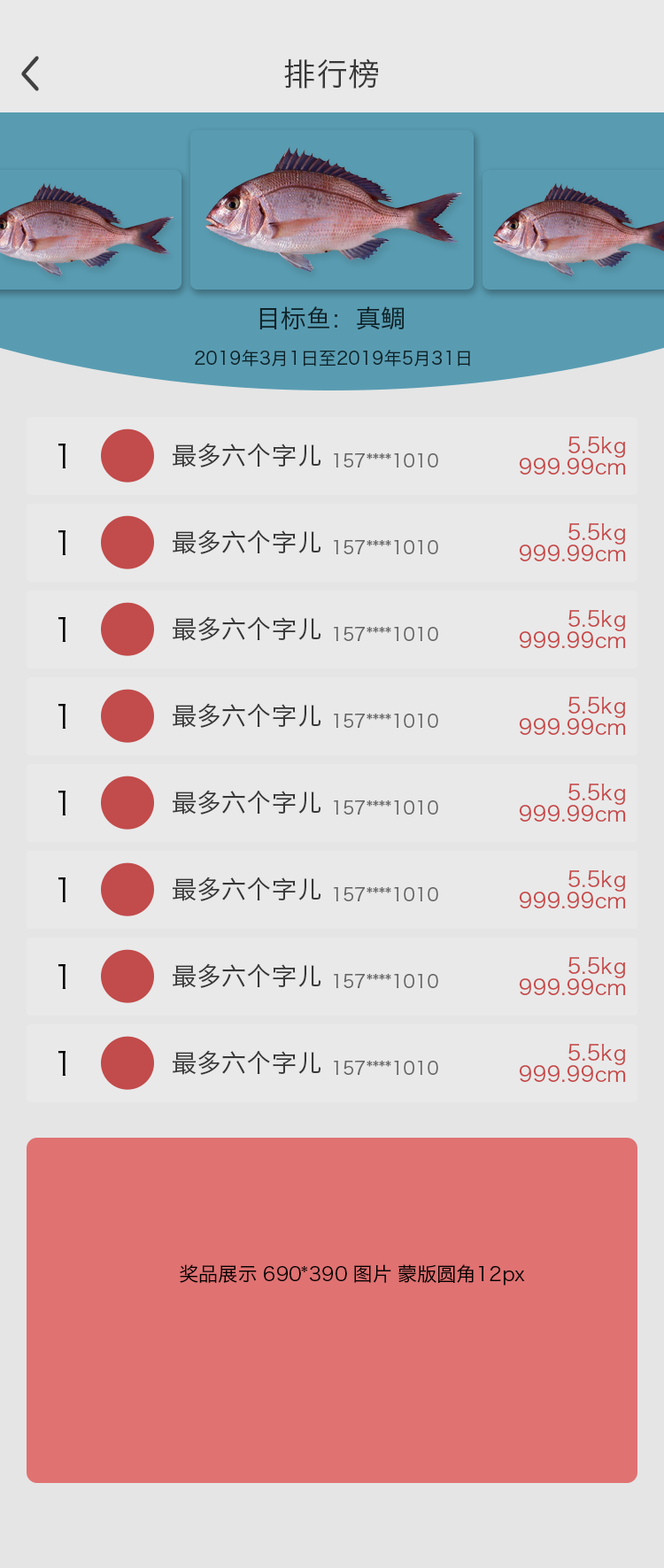
<style>
.page{position:relative;width:664px;height:1568px;background:#e9e9e9}
.page>*{position:absolute;margin:0}
.t1{font:31.9px "HiraginoSansGB-W3";color:#373737}
.t2{font:24.8px "HiraginoSansGB-W3";color:#0f2228}
.t3{font:17.7px "HiraginoSansGB-W3";color:#0f2228}
.t4{font:21.2px/21.2px "HiraginoSansGB-W3";color:#c64646}
.t5{font:31.9px "HiraginoSansGB-W3";color:#000000}
.t6{font:24.8px "HiraginoSansGB-W3";color:#373737}
.t7{font:17.7px "HiraginoSansGB-W3";color:#646464}
.t8{font:19.5px "HiraginoSansGB-W3";color:#000000}
</style>
<div class="page">
<p class="t1" style="left:284px;top:58px;width:94px;height:31px">排行榜</p>
<p class="t1" style="left:284px;top:58px;width:94px;height:31px">排行榜</p>
<p class="t2" style="left:259px;top:306px;width:146px;height:24px">目标鱼：真鲷</p>
<p class="t2" style="left:259px;top:306px;width:146px;height:24px">目标鱼：真鲷</p>
<p class="t3" style="left:195px;top:350px;width:275px;height:17px">2019年3月1日至2019年5月31日</p>
<p class="t3" style="left:195px;top:350px;width:275px;height:17px">2019年3月1日至2019年5月31日</p>
<p class="t4" style="left:519px;top:436px;width:107px;height:39px;text-align:right">5.5kg<br>999.99cm</p>
<p class="t4" style="left:519px;top:436px;width:107px;height:39px;text-align:right">5.5kg<br>999.99cm</p>
<p class="t5" style="left:58px;top:444px;width:8px;height:24px">1</p>
<p class="t5" style="left:58px;top:444px;width:8px;height:24px">1</p>
<p class="t6" style="left:173px;top:443px;width:148px;height:24px">最多六个字儿</p>
<p class="t6" style="left:173px;top:443px;width:148px;height:24px">最多六个字儿</p>
<p class="t7" style="left:334px;top:453px;width:104px;height:14px">157****1010</p>
<p class="t7" style="left:334px;top:453px;width:104px;height:14px">157****1010</p>
<p class="t5" style="left:58px;top:530px;width:8px;height:25px">1</p>
<p class="t5" style="left:58px;top:530px;width:8px;height:25px">1</p>
<p class="t6" style="left:173px;top:529px;width:148px;height:25px">最多六个字儿</p>
<p class="t6" style="left:173px;top:529px;width:148px;height:25px">最多六个字儿</p>
<p class="t4" style="left:519px;top:522px;width:107px;height:39px;text-align:right">5.5kg<br>999.99cm</p>
<p class="t4" style="left:519px;top:522px;width:107px;height:39px;text-align:right">5.5kg<br>999.99cm</p>
<p class="t7" style="left:334px;top:540px;width:104px;height:14px">157****1010</p>
<p class="t7" style="left:334px;top:540px;width:104px;height:14px">157****1010</p>
<p class="t5" style="left:58px;top:617px;width:8px;height:25px">1</p>
<p class="t5" style="left:58px;top:617px;width:8px;height:25px">1</p>
<p class="t6" style="left:173px;top:616px;width:148px;height:25px">最多六个字儿</p>
<p class="t6" style="left:173px;top:616px;width:148px;height:25px">最多六个字儿</p>
<p class="t4" style="left:519px;top:609px;width:107px;height:39px;text-align:right">5.5kg<br>999.99cm</p>
<p class="t4" style="left:519px;top:609px;width:107px;height:39px;text-align:right">5.5kg<br>999.99cm</p>
<p class="t7" style="left:334px;top:627px;width:104px;height:14px">157****1010</p>
<p class="t7" style="left:334px;top:627px;width:104px;height:14px">157****1010</p>
<p class="t4" style="left:519px;top:696px;width:107px;height:39px;text-align:right">5.5kg<br>999.99cm</p>
<p class="t4" style="left:519px;top:696px;width:107px;height:39px;text-align:right">5.5kg<br>999.99cm</p>
<p class="t5" style="left:58px;top:704px;width:8px;height:25px">1</p>
<p class="t5" style="left:58px;top:704px;width:8px;height:25px">1</p>
<p class="t6" style="left:173px;top:703px;width:148px;height:25px">最多六个字儿</p>
<p class="t6" style="left:173px;top:703px;width:148px;height:25px">最多六个字儿</p>
<p class="t7" style="left:334px;top:714px;width:104px;height:14px">157****1010</p>
<p class="t7" style="left:334px;top:714px;width:104px;height:14px">157****1010</p>
<p class="t4" style="left:519px;top:783px;width:107px;height:39px;text-align:right">5.5kg<br>999.99cm</p>
<p class="t4" style="left:519px;top:783px;width:107px;height:39px;text-align:right">5.5kg<br>999.99cm</p>
<p class="t5" style="left:58px;top:791px;width:8px;height:24px">1</p>
<p class="t5" style="left:58px;top:791px;width:8px;height:24px">1</p>
<p class="t6" style="left:173px;top:790px;width:148px;height:25px">最多六个字儿</p>
<p class="t6" style="left:173px;top:790px;width:148px;height:25px">最多六个字儿</p>
<p class="t7" style="left:334px;top:800px;width:104px;height:15px">157****1010</p>
<p class="t7" style="left:334px;top:800px;width:104px;height:15px">157****1010</p>
<p class="t4" style="left:519px;top:869px;width:107px;height:39px;text-align:right">5.5kg<br>999.99cm</p>
<p class="t4" style="left:519px;top:869px;width:107px;height:39px;text-align:right">5.5kg<br>999.99cm</p>
<p class="t5" style="left:58px;top:877px;width:8px;height:25px">1</p>
<p class="t5" style="left:58px;top:877px;width:8px;height:25px">1</p>
<p class="t6" style="left:173px;top:877px;width:148px;height:24px">最多六个字儿</p>
<p class="t6" style="left:173px;top:877px;width:148px;height:24px">最多六个字儿</p>
<p class="t7" style="left:334px;top:887px;width:104px;height:14px">157****1010</p>
<p class="t7" style="left:334px;top:887px;width:104px;height:14px">157****1010</p>
<p class="t5" style="left:58px;top:964px;width:8px;height:25px">1</p>
<p class="t5" style="left:58px;top:964px;width:8px;height:25px">1</p>
<p class="t6" style="left:173px;top:963px;width:148px;height:25px">最多六个字儿</p>
<p class="t6" style="left:173px;top:963px;width:148px;height:25px">最多六个字儿</p>
<p class="t4" style="left:519px;top:956px;width:107px;height:39px;text-align:right">5.5kg<br>999.99cm</p>
<p class="t4" style="left:519px;top:956px;width:107px;height:39px;text-align:right">5.5kg<br>999.99cm</p>
<p class="t7" style="left:334px;top:974px;width:104px;height:14px">157****1010</p>
<p class="t7" style="left:334px;top:974px;width:104px;height:14px">157****1010</p>
<p class="t4" style="left:519px;top:1043px;width:107px;height:39px;text-align:right">5.5kg<br>999.99cm</p>
<p class="t4" style="left:519px;top:1043px;width:107px;height:39px;text-align:right">5.5kg<br>999.99cm</p>
<p class="t5" style="left:58px;top:1051px;width:8px;height:25px">1</p>
<p class="t5" style="left:58px;top:1051px;width:8px;height:25px">1</p>
<p class="t6" style="left:173px;top:1050px;width:148px;height:25px">最多六个字儿</p>
<p class="t6" style="left:173px;top:1050px;width:148px;height:25px">最多六个字儿</p>
<p class="t7" style="left:334px;top:1061px;width:104px;height:14px">157****1010</p>
<p class="t7" style="left:334px;top:1061px;width:104px;height:14px">157****1010</p>
<p class="t8" style="left:180px;top:1264px;width:345px;height:22px">奖品展示 690*390 图片 蒙版圆角12px</p>
</div>
